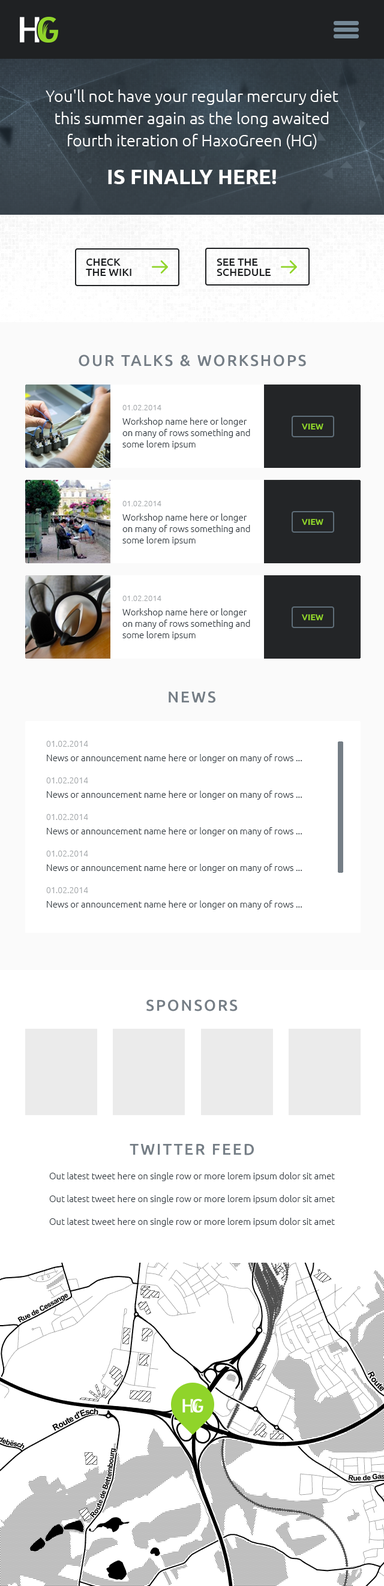
<style>
.page{position:relative;width:384px;height:1586px;background:#ffffff}
.page>*{position:absolute;margin:0}
.t1{font:16.2px/22.2px "Ubuntu-Light";color:#ffffff}
.t2{font:20.4px "Ubuntu-Bold";color:#ffffff;text-transform:uppercase}
.t3{font:10.8px/10.2px "Ubuntu-Medium";color:#1f2123;text-transform:uppercase}
.t4{font:15.6px "Ubuntu-Medium";letter-spacing:0.1em;color:#757e86;text-transform:uppercase}
.t5{font:7.8px "Ubuntu-Light";color:#a2a6a9}
.t6{font:9px/11.4px "Ubuntu-Light";color:#2d363d}
.t7{font:8.4px "Ubuntu-Bold";color:#90d42a;text-transform:uppercase}
.t8{font:8.4px "Ubuntu-Light";color:#a2a6a9}
.t9{font:9px "Ubuntu-Light";color:#2d363d}
</style>
<div class="page">
<p class="t1" style="left:46px;top:89px;width:292px;height:60px;text-align:center">You'll not have your regular mercury diet<br>this summer again as the long awaited<br>fourth iteration of HaxoGreen (HG)</p>
<p class="t2" style="left:108px;top:170px;width:168px;height:14px">is finally here!</p>
<p class="t3" style="left:86px;top:259px;width:45px;height:17px">CHECK<br>THE WIKI</p>
<p class="t3" style="left:217px;top:259px;width:54px;height:17px">SEE THE<br>SCHEDULE</p>
<p class="t4" style="left:79px;top:355px;width:227px;height:12px">OUR TALKS &amp; workshops</p>
<p class="t5" style="left:122px;top:405px;width:39px;height:5px">01.02.2014</p>
<p class="t6" style="left:122px;top:418px;width:128px;height:31px">Workshop name here or longer <br>on many of rows something and<br>some lorem ipsum</p>
<p class="t7" style="left:302px;top:424px;width:21px;height:6px">view</p>
<p class="t5" style="left:122px;top:501px;width:39px;height:5px">01.02.2014</p>
<p class="t6" style="left:122px;top:514px;width:128px;height:31px">Workshop name here or longer <br>on many of rows something and<br>some lorem ipsum</p>
<p class="t7" style="left:302px;top:519px;width:21px;height:6px">view</p>
<p class="t5" style="left:122px;top:596px;width:39px;height:5px">01.02.2014</p>
<p class="t6" style="left:122px;top:608px;width:128px;height:32px">Workshop name here or longer <br>on many of rows something and<br>some lorem ipsum</p>
<p class="t7" style="left:302px;top:614px;width:21px;height:6px">view</p>
<p class="t4" style="left:169px;top:691px;width:46px;height:12px">NEWS</p>
<p class="t8" style="left:46px;top:741px;width:42px;height:6px">01.02.2014</p>
<p class="t9" style="left:47px;top:754px;width:255px;height:9px">News or announcement name here or longer on many of rows ...</p>
<p class="t8" style="left:46px;top:778px;width:42px;height:6px">01.02.2014</p>
<p class="t9" style="left:47px;top:791px;width:255px;height:9px">News or announcement name here or longer on many of rows ...</p>
<p class="t8" style="left:46px;top:814px;width:42px;height:6px">01.02.2014</p>
<p class="t9" style="left:47px;top:827px;width:255px;height:9px">News or announcement name here or longer on many of rows ...</p>
<p class="t8" style="left:46px;top:851px;width:42px;height:6px">01.02.2014</p>
<p class="t9" style="left:47px;top:864px;width:255px;height:9px">News or announcement name here or longer on many of rows ...</p>
<p class="t8" style="left:46px;top:887px;width:42px;height:6px">01.02.2014</p>
<p class="t9" style="left:47px;top:901px;width:255px;height:9px">News or announcement name here or longer on many of rows ...</p>
<p class="t4" style="left:146px;top:1000px;width:92px;height:12px">SPONSORS</p>
<p class="t4" style="left:130px;top:1144px;width:124px;height:12px">TWITTER FEED</p>
<p class="t6" style="left:49px;top:1172px;width:286px;height:55px">Out latest tweet here on single row or more lorem ipsum dolor sit amet<br><br>Out latest tweet here on single row or more lorem ipsum dolor sit amet<br><br>Out latest tweet here on single row or more lorem ipsum dolor sit amet</p>
</div>
